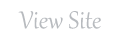
<style>
.page{position:relative;width:121px;height:42px;background:#ffffff}
.page>*{position:absolute;margin:0}
.t1{font:30px "Gabriola";color:#b8bbbf}
</style>
<div class="page">
<p class="t1" style="left:18px;top:11px;width:83px;height:18px">View Site</p>
</div>
